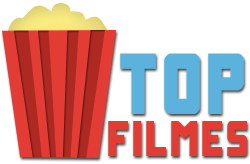
<style>
.page{position:relative;width:250px;height:164px;background:#ffffff}
.page>*{position:absolute;margin:0}
.t1{font:87.7px "UrbanDefender";letter-spacing:0.05em;color:#5bb2dd}
.t2{font:50.7px "UrbanDefender";letter-spacing:0.05em;color:#e23c34}
</style>
<div class="page">
<p class="t1" style="left:120px;top:53px;width:124px;height:61px">TOP</p>
<p class="t2" style="left:108px;top:121px;width:139px;height:35px">Filmes</p>
</div>
